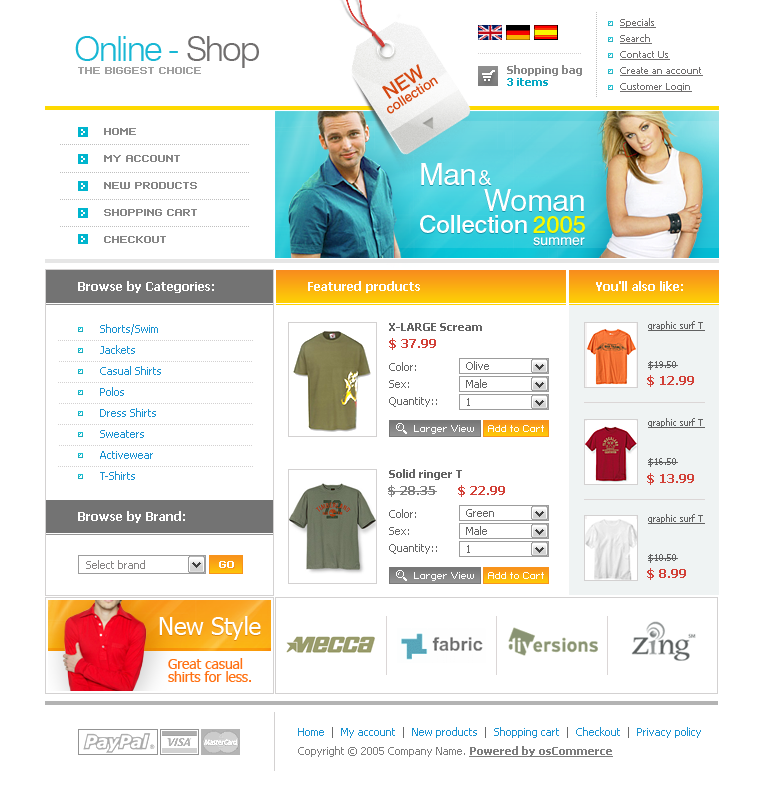
<style>
.page{position:relative;width:766px;height:800px;background:#ffffff}
.page>*{position:absolute;margin:0}
.t1{font:10px/16px "Tahoma";color:#706e6e;text-decoration:underline}
.t2{font:35px "Swiss721BT-Light";letter-spacing:-0.05em;color:#18b7d4}
.t3{font:35px "Swiss721BT-Light";letter-spacing:-0.05em;color:#706e6e}
.t4{font:13.6px/13px "Swiss721BT-Medium";letter-spacing:-0.01em;color:#d44710}
.t5{font:19.6px/13px "Swiss721BT-Medium";letter-spacing:-0.01em;color:#d44710}
.t6{font:11px "Tahoma-Bold";color:#888888}
.t7{font:8px "Standard0753";color:#a0a0a0;text-transform:uppercase;font-weight:bold}
.t8{font:11px "Tahoma-Bold";color:#08a8c4}
.t9{font:8px/27px "Standard0753";color:#878787;text-transform:uppercase;font-weight:bold}
.t10{font:30px "Swiss721BT-Roman";letter-spacing:-0.01em;color:#ffffff}
.t11{font:20px "Swiss721BT-Roman";letter-spacing:-0.01em;color:#ffffff}
.t12{font:24px "Swiss721BT-Medium";letter-spacing:-0.01em;color:#ffffff}
.t13{font:24px "Swiss721BT-Medium";letter-spacing:-0.01em;color:#f8f800}
.t14{font:14px "Swiss721BT-Medium";letter-spacing:-0.01em;color:#ffffff}
.t15{font:12px "Tahoma-Bold";color:#ffffff}
.t16{font:11px/21px "Tahoma";color:#1992d1}
.t17{font:11px "Tahoma-Bold";color:#646464}
.t18{font:9px "Tahoma";color:#616161;text-decoration:underline}
.t19{font:12px "Tahoma-Bold";color:#d24037}
.t20{font:11px/17px "Tahoma";color:#646464}
.t21{font:11px "Tahoma";color:#646464}
.t22{font:9px "Tahoma";color:#616161}
.t23{font:8px "Standard0753";color:#ffffff}
.t24{font:12px "Tahoma-Bold";color:#7f7f7f}
.t25{font:11px "Tahoma";color:#878484}
.t26{font:8px "Standard0753";color:#ffffff;text-transform:uppercase;font-weight:bold}
.t27{font:24px "Tahoma";letter-spacing:-0.01em;color:#ffffff}
.t28{font:14px/13px "Tahoma";letter-spacing:-0.01em;color:#ff7113}
.t29{font:11px "Tahoma";color:#1992d1}
.t30{font:11px "Tahoma";color:#6a6a6a}
.t31{font:11px "Tahoma";color:#7d7d7d}
.t32{font:11px "Tahoma-Bold";color:#7d7d7d;text-decoration:underline}
</style>
<div class="page">
<p class="t1" style="left:620px;top:18px;width:83px;height:74px">Specials<br>Search<br>Contact Us<br>Create an account<br>Customer Login</p>
<p class="t2" style="left:75px;top:36px;width:184px;height:32px">Online -<span class="t3"> Shop</span></p>
<p class="t4" style="left:382px;top:64px;width:57px;height:50px;text-align:center;rotate:-33deg"><span class="t5">NEW<br></span>collection</p>
<p class="t6" style="left:507px;top:65px;width:75px;height:11px">Shopping bag</p>
<p class="t7" style="left:78px;top:67px;width:123px;height:7px">the biggest choice</p>
<p class="t8" style="left:507px;top:78px;width:41px;height:8px">3 items</p>
<p class="t9" style="left:104px;top:128px;width:93px;height:115px">Home<br>My account<br>New products<br>Shopping cart<br>Checkout</p>
<p class="t10" style="left:421px;top:163px;width:54px;height:22px">Man</p>
<p class="t11" style="left:479px;top:170px;width:13px;height:15px">&amp;</p>
<p class="t10" style="left:484px;top:189px;width:100px;height:22px">Woman</p>
<p class="t12" style="left:420px;top:215px;width:107px;height:18px">Collection</p>
<p class="t13" style="left:533px;top:216px;width:52px;height:17px">2005</p>
<p class="t14" style="left:533px;top:237px;width:52px;height:9px">summer</p>
<p class="t15" style="left:78px;top:281px;width:136px;height:12px">Browse by Categories:</p>
<p class="t15" style="left:308px;top:281px;width:112px;height:12px">Featured products</p>
<p class="t15" style="left:596px;top:281px;width:87px;height:10px">You'll also like:</p>
<p class="t16" style="left:100px;top:324px;width:61px;height:156px">Shorts/Swim<br>Jackets <br>Casual Shirts <br>Polos <br>Dress Shirts <br>Sweaters <br>Activewear<br>T-Shirts <br>Шорты</p>
<p class="t17" style="left:389px;top:323px;width:93px;height:8px">X-LARGE Scream</p>
<p class="t18" style="left:648px;top:321px;width:57px;height:10px">graphic surf T</p>
<p class="t19" style="left:389px;top:338px;width:47px;height:12px">$ 37.99</p>
<p class="t20" style="left:389px;top:362px;width:48px;height:45px">Color: <br>Sex:<br>Quantity::</p>
<p class="t21" style="left:466px;top:361px;width:23px;height:9px">Olive</p>
<p class="t22" style="left:648px;top:361px;width:30px;height:9px">$19.50</p>
<p class="t19" style="left:647px;top:375px;width:47px;height:12px">$ 12.99</p>
<p class="t21" style="left:466px;top:379px;width:21px;height:9px">Male</p>
<p class="t21" style="left:467px;top:398px;width:3px;height:8px">1</p>
<p class="t23" style="left:414px;top:425px;width:60px;height:9px">Larger View</p>
<p class="t23" style="left:488px;top:425px;width:56px;height:7px">Add to Cart</p>
<p class="t18" style="left:648px;top:418px;width:57px;height:10px">graphic surf T</p>
<p class="t22" style="left:648px;top:458px;width:30px;height:9px">$16.50</p>
<p class="t17" style="left:389px;top:469px;width:73px;height:11px">Solid ringer T</p>
<p class="t19" style="left:647px;top:473px;width:47px;height:12px">$ 13.99</p>
<p class="t24" style="left:388px;top:485px;width:49px;height:12px">$ 28.35</p>
<p class="t19" style="left:458px;top:485px;width:47px;height:12px">$ 22.99</p>
<p class="t20" style="left:389px;top:509px;width:48px;height:45px">Color: <br>Sex:<br>Quantity::</p>
<p class="t21" style="left:466px;top:509px;width:28px;height:8px">Green</p>
<p class="t15" style="left:78px;top:511px;width:107px;height:12px">Browse by Brand:</p>
<p class="t18" style="left:648px;top:514px;width:57px;height:10px">graphic surf T</p>
<p class="t21" style="left:466px;top:526px;width:21px;height:9px">Male</p>
<p class="t21" style="left:467px;top:545px;width:3px;height:8px">1</p>
<p class="t22" style="left:648px;top:554px;width:30px;height:9px">$10.50</p>
<p class="t25" style="left:86px;top:560px;width:59px;height:9px">Select brand</p>
<p class="t26" style="left:219px;top:561px;width:15px;height:7px">GO</p>
<p class="t19" style="left:647px;top:568px;width:39px;height:12px">$ 8.99</p>
<p class="t23" style="left:414px;top:572px;width:60px;height:9px">Larger View</p>
<p class="t23" style="left:488px;top:572px;width:56px;height:7px">Add to Cart</p>
<p class="t27" style="left:159px;top:616px;width:102px;height:24px">New Style</p>
<p class="t28" style="left:168px;top:658px;width:83px;height:24px">Great casual <br>shirts for less.</p>
<p class="t29" style="left:298px;top:727px;width:403px;height:11px">Home <span class="t30"> |  </span>My account <span class="t30"> |  </span>New products <span class="t30"> |  </span>Shopping cart <span class="t30"> |  </span>Checkout <span class="t30"> |  </span>Privacy policy</p>
<p class="t31" style="left:298px;top:746px;width:315px;height:11px">Copyright © 2005 Company Name. <span class="t32">Powered by osCommerce</span></p>
</div>
